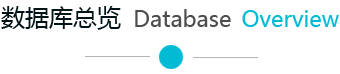
<style>
.page{position:relative;width:340px;height:74px;background:#ffffff}
.page>*{position:absolute;margin:0}
.t1{font:24px "MicrosoftYaHei";color:#001316}
.t2{font:22px "MicrosoftYaHei";color:#4d4d4d}
.t3{font:22px "MicrosoftYaHei";color:#00bbd3}
</style>
<div class="page">
<p class="t1" style="left:1px;top:6px;width:120px;height:24px">数据库总览</p>
<p class="t2" style="left:135px;top:9px;width:96px;height:18px">Database</p>
<p class="t3" style="left:242px;top:10px;width:97px;height:17px">Overview</p>
</div>
